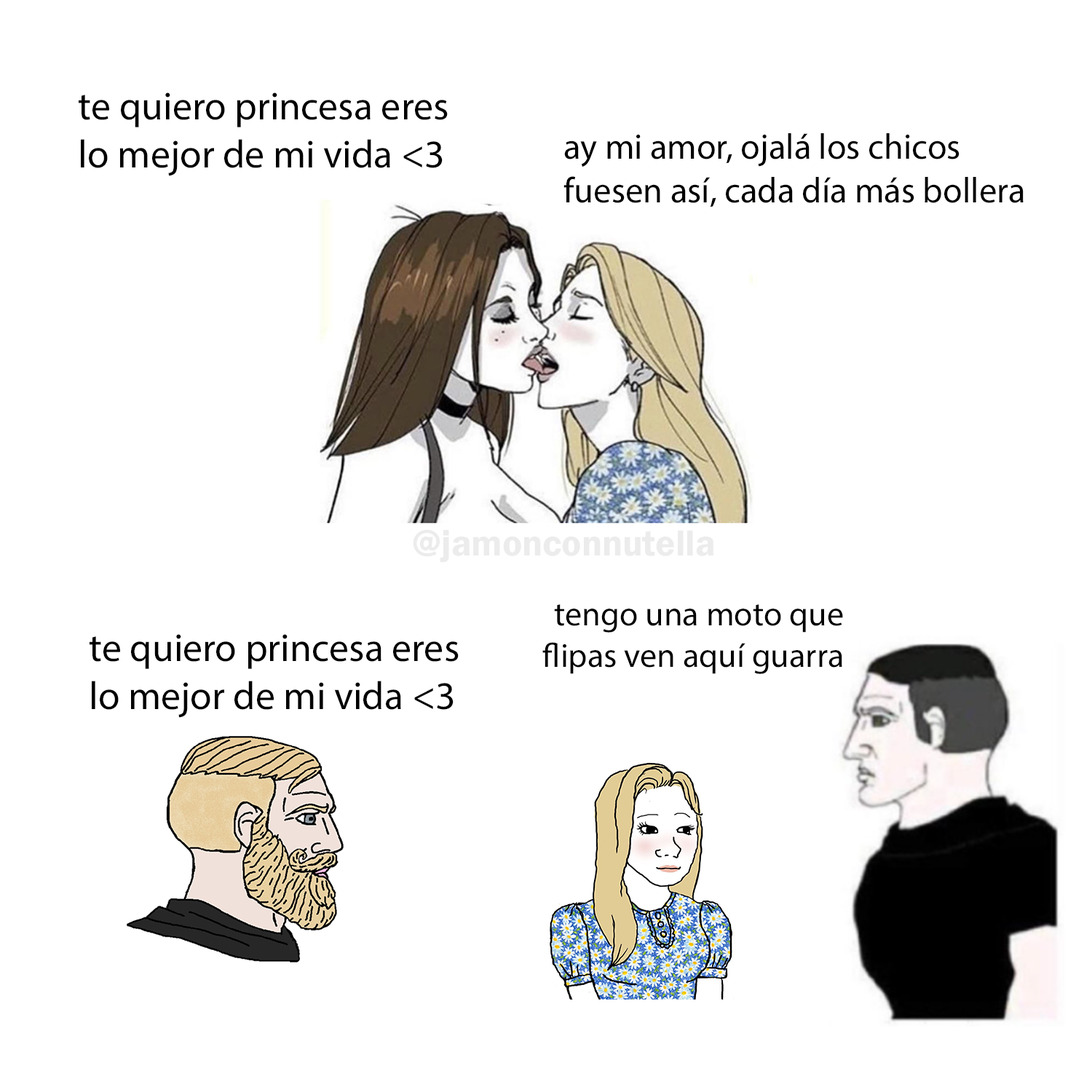
<style>
.page{position:relative;width:1092px;height:1092px;background:#ffffff}
.page>*{position:absolute;margin:0}
.t1{font:39.4px "MyriadPro-Regular";color:#000000}
.t2{font:35.9px "MyriadPro-Regular";color:#000000}
.t3{font:37.3px "FranklinGothic-Demi";color:#ececec}
.t4{font:33.7px "MyriadPro-Regular";color:#000000}
</style>
<div class="page">
<p class="t1" style="left:79px;top:92px;width:369px;height:84px">te quiero princesa eres<br>lo mejor de mi vida &lt;3</p>
<p class="t2" style="left:563px;top:133px;width:461px;height:74px">ay mi amor, ojalá los chicos<br>fuesen así, cada día más bollera</p>
<p class="t3" style="left:413px;top:529px;width:301px;height:34px">@jamonconnutella</p>
<p class="t4" style="left:542px;top:604px;width:301px;height:70px;text-align:right">tengo una moto que<br>flipas ven aquí guarra</p>
<p class="t1" style="left:90px;top:634px;width:369px;height:84px">te quiero princesa eres<br>lo mejor de mi vida &lt;3</p>
</div>
